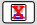
<style>
.page{position:relative;width:37px;height:25px;background:#ffffff}
.page>*{position:absolute;margin:0}
.t1{font:18px "TimesNewRomanPSMT";color:#ff0000;font-weight:bold}
</style>
<div class="page">
<p class="t1" style="left:11px;top:6px;width:14px;height:13px">X</p>
</div>
